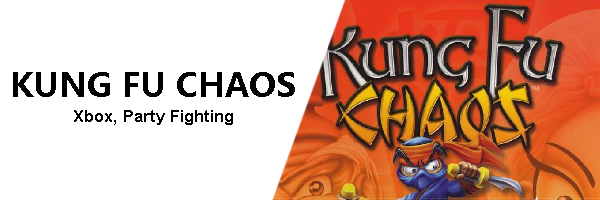
<style>
.page{position:relative;width:600px;height:200px;background:#ffffff}
.page>*{position:absolute;margin:0}
.t1{font:16.7px/25px "Arial-BoldMT";color:#000000}
.t2{font:33.3px/25px "MicrosoftYaHei-Bold";color:#000000}
</style>
<div class="page">
<p class="t1" style="left:13px;top:72px;width:282px;height:53px;text-align:center"><span class="t2">KUNG FU CHAOS<br></span>Xbox, Party Fighting</p>
</div>
